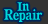
<style>
.page{position:relative;width:48px;height:24px;background:#333333}
.page>*{position:absolute;margin:0}
.t1{font:11.2px "RyuminPro-ExBold";letter-spacing:-0.04em;color:#00d9dc;scale:1.12 1}
.t2{font:14px "RyuminPro-ExBold";letter-spacing:-0.04em;color:#00d9dc;scale:0.9 1}
</style>
<div class="page">
<p class="t1" style="left:17px;top:2px;width:13px;height:9px">I<span class="t2">n</span></p>
<p class="t2" style="left:4px;top:9px;width:39px;height:13px">Repair</p>
</div>
